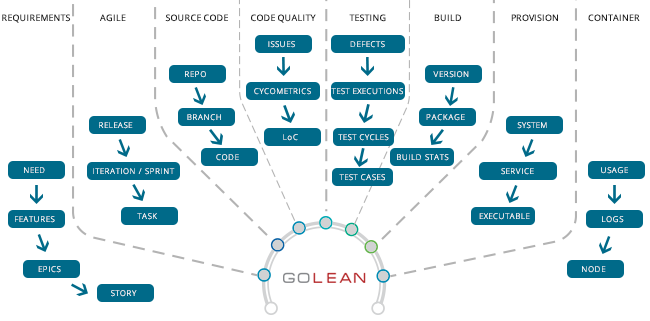
<style>
.page{position:relative;width:650px;height:321px;background:#ffffff}
.page>*{position:absolute;margin:0}
.t1{font:9px "OpenSans";color:#1f1f1f;text-transform:uppercase}
.t2{font:8px "OpenSans-Light";letter-spacing:0.075em;text-transform:uppercase}
.t3{font:8px "OpenSans-Light";letter-spacing:0.075em;color:#ffffff;text-transform:uppercase}
.t4{font:8px "OpenSans-Light";letter-spacing:0.075em}
</style>
<div class="page">
<p class="t1" style="left:2px;top:14px;width:69px;height:9px">Requirements</p>
<p class="t1" style="left:100px;top:14px;width:26px;height:8px">Agile</p>
<p class="t1" style="left:165px;top:14px;width:63px;height:8px">Source Code</p>
<p class="t1" style="left:251px;top:14px;width:65px;height:9px">Code Quality</p>
<p class="t1" style="left:349px;top:14px;width:37px;height:8px">Testing</p>
<p class="t1" style="left:434px;top:14px;width:28px;height:8px">Build</p>
<p class="t1" style="left:511px;top:14px;width:47px;height:8px">Provision</p>
<p class="t1" style="left:588px;top:14px;width:52px;height:8px">Container</p>
<p class="t2" style="left:268px;top:41px;width:27px;height:7px">Issues</p>
<p class="t2" style="left:350px;top:41px;width:35px;height:7px">Defects</p>
<p class="t3" style="left:185px;top:71px;width:21px;height:7px">Repo</p>
<p class="t3" style="left:433px;top:71px;width:36px;height:7px">Version</p>
<p class="t3" style="left:254px;top:88px;width:57px;height:7px">Cycometrics</p>
<p class="t3" style="left:331px;top:88px;width:72px;height:7px">Test Executions</p>
<p class="t3" style="left:99px;top:122px;width:34px;height:7px">Release</p>
<p class="t3" style="left:187px;top:114px;width:34px;height:7px">Branch</p>
<p class="t2" style="left:426px;top:114px;width:39px;height:7px">package</p>
<p class="t3" style="left:517px;top:122px;width:30px;height:7px">system</p>
<p class="t4" style="left:283px;top:134px;width:15px;height:7px">LoC</p>
<p class="t2" style="left:338px;top:134px;width:51px;height:7px">Test Cycles</p>
<p class="t2" style="left:216px;top:154px;width:23px;height:7px">Code</p>
<p class="t3" style="left:397px;top:154px;width:52px;height:7px">Build Stats</p>
<p class="t3" style="left:24px;top:167px;width:21px;height:6px">Need</p>
<p class="t3" style="left:93px;top:168px;width:82px;height:7px">Iteration / Sprint</p>
<p class="t3" style="left:339px;top:174px;width:46px;height:7px">Test cases</p>
<p class="t2" style="left:501px;top:168px;width:33px;height:7px">service</p>
<p class="t2" style="left:601px;top:167px;width:27px;height:7px">Usage</p>
<p class="t2" style="left:15px;top:216px;width:40px;height:7px">features</p>
<p class="t3" style="left:137px;top:213px;width:20px;height:7px">Task</p>
<p class="t2" style="left:479px;top:213px;width:51px;height:7px">Executable</p>
<p class="t2" style="left:602px;top:216px;width:22px;height:7px">Logs</p>
<p class="t2" style="left:38px;top:266px;width:23px;height:7px">Epics</p>
<p class="t3" style="left:582px;top:266px;width:24px;height:7px">Node</p>
<p class="t3" style="left:111px;top:290px;width:26px;height:7px">Story</p>
</div>
